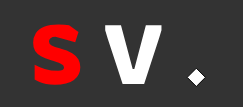
<style>
.page{position:relative;width:243px;height:107px;background:#333333}
.page>*{position:absolute;margin:0}
.t1{font:83px "Rowdies-Regular";color:#ffffff}
.t2{font:83px "Rowdies-Regular";color:#ff0000}
</style>
<div class="page">
<p class="t1" style="left:32px;top:23px;width:175px;height:65px"><span class="t2">S </span>V .</p>
</div>
